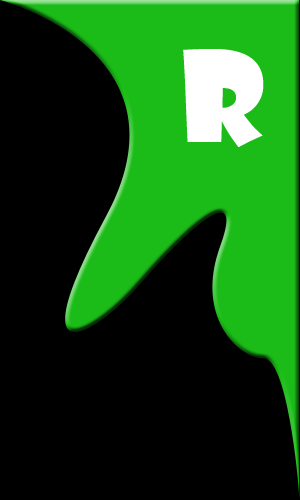
<style>
.page{position:relative;width:300px;height:500px;background:#000000}
.page>*{position:absolute;margin:0}
.t1{font:121.5px "ShowcardGothic-Reg";color:#ffffff}
</style>
<div class="page">
<p class="t1" style="left:183px;top:49px;width:81px;height:98px">R</p>
</div>
